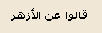
<style>
.page{position:relative;width:102px;height:33px;background:#f0e7d6}
.page>*{position:absolute;margin:0}
.t1{font:11px "Tahoma-Bold";color:#000000}
</style>
<div class="page">
<p class="t1" style="left:11px;top:8px;width:76px;height:13px">قالوا عن الأزهر</p>
</div>
